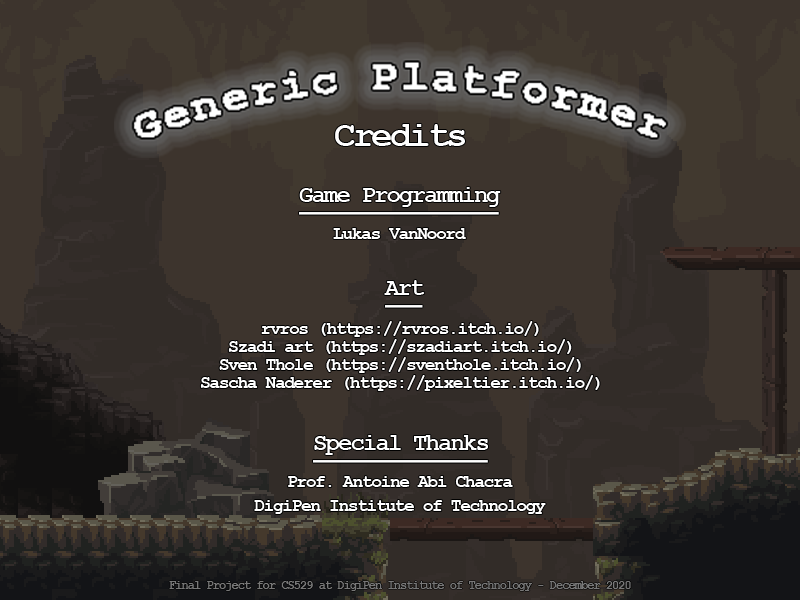
<style>
.page{position:relative;width:800px;height:600px;background:#3d342d}
.page>*{position:absolute;margin:0}
.t1{font:36px "CourierNewPS-BoldMT";letter-spacing:-0.08em;color:#ffffff}
.t2{font:24px "CourierNewPS-BoldMT";letter-spacing:-0.08em;color:#ffffff;text-decoration:underline}
.t3{font:18px "CourierNewPS-BoldMT";letter-spacing:-0.08em;color:#ffffff}
.t4{font:18px/18px "CourierNewPS-BoldMT";letter-spacing:-0.08em;color:#ffffff}
.t5{font:18px/24px "CourierNewPS-BoldMT";letter-spacing:-0.08em;color:#ffffff}
.t6{font:12px "CourierNewPS-BoldMT";letter-spacing:-0.08em;color:#787878}
</style>
<div class="page">
<p class="t1" style="left:335px;top:124px;width:130px;height:22px">Credits</p>
<p class="t2" style="left:299px;top:187px;width:202px;height:28px">Game Programming</p>
<p class="t3" style="left:333px;top:228px;width:133px;height:11px">Lukas VanNoord</p>
<p class="t2" style="left:384px;top:280px;width:41px;height:28px">Art</p>
<p class="t4" style="left:200px;top:321px;width:400px;height:70px;text-align:center">rvros (https://rvros.itch.io/)<br>Szadi art (https://szadiart.itch.io/)<br>Sven Thole (https://sventhole.itch.io/)<br>Sascha Naderer (https://pixeltier.itch.io/)</p>
<p class="t2" style="left:313px;top:435px;width:175px;height:28px">Special Thanks</p>
<p class="t5" style="left:254px;top:476px;width:292px;height:38px;text-align:center">Prof. Antoine Abi Chacra<br>DigiPen Institute of Technology</p>
<p class="t6" style="left:169px;top:581px;width:462px;height:10px">Final Project for CS529 at DigiPen Institute of Technology - December 2020</p>
</div>
